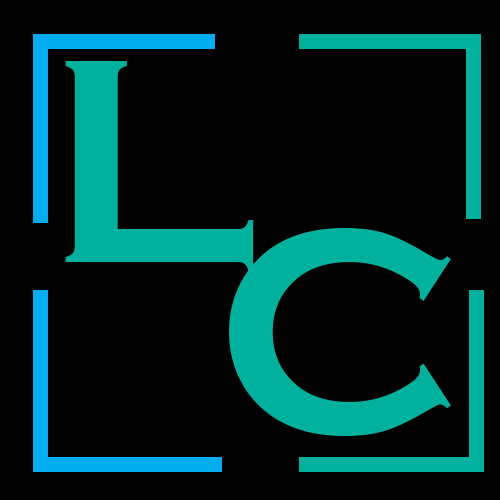
<style>
.page{position:relative;width:500px;height:500px;background:#000000}
.page>*{position:absolute;margin:0}
.t1{font:300.7px "CopperplateGothic-Bold";letter-spacing:0.02em;color:#00b19e}
</style>
<div class="page">
<p class="t1" style="left:65px;top:61px;width:189px;height:210px">L</p>
<p class="t1" style="left:229px;top:228px;width:222px;height:208px">C</p>
</div>
